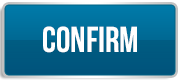
<style>
.page{position:relative;width:180px;height:80px}
.page>*{position:absolute;margin:0}
.t1{font:36px "UTM-Bebas";color:#ffffff}
</style>
<div class="page">
<p class="t1" style="left:43px;top:26px;width:94px;height:27px">confirm</p>
</div>
